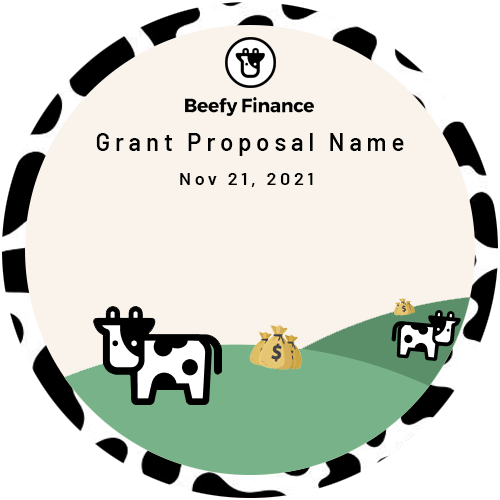
<style>
.page{position:relative;width:500px;height:500px;background:#f9f3eb}
.page>*{position:absolute;margin:0}
.t1{font:24px "Barlow-SemiBold";letter-spacing:0.2em;color:#000000}
.t2{font:18px "Barlow-SemiBold";letter-spacing:0.2em;color:#000000}
</style>
<div class="page">
<p class="t1" style="left:96px;top:133px;width:308px;height:23px">Grant Proposal Name</p>
<p class="t2" style="left:180px;top:173px;width:133px;height:14px">Nov 21, 2021</p>
</div>
